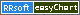
<style>
.page{position:relative;width:80px;height:15px;background:#334300}
.page>*{position:absolute;margin:0}
.t1{font:9px "TrebuchetMS";color:#ffffff}
.t2{font:8px "TrebuchetMS";color:#ffffff;scale:1.13 1}
</style>
<div class="page">
<p class="t1" style="left:4px;top:4px;width:25px;height:7px">RRsoft</p>
<p class="t2" style="left:35px;top:4px;width:42px;height:8px">easyChart</p>
</div>
